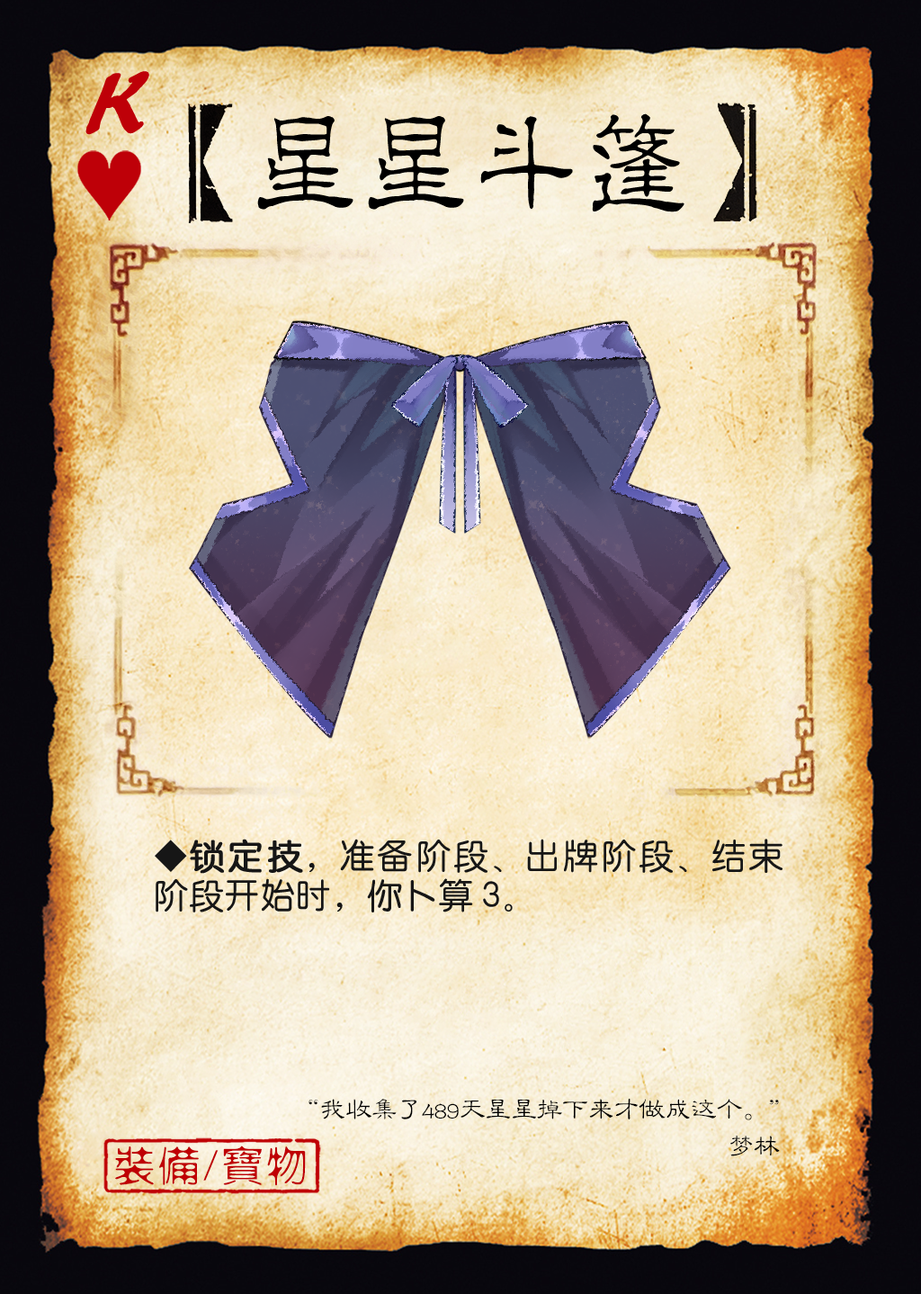
<style>
.page{position:relative;width:921px;height:1294px}
.page>*{position:absolute;margin:0}
.t1{font:110.9px "HYi1gf";color:#be0008;font-weight:bold;font-style:italic}
.t2{font:110.9px "¾­µä·±½ÇÁ¥ Regular";color:#000000}
.t3{font:35.6px/39.4px "HYe3gj";color:#161616}
.t4{font:35.6px/39.4px "HYe3gj";color:#161616;font-weight:bold}
.t5{font:27.1px "FZLBJW--GB1-0";letter-spacing:-0.05em;color:#000000}
.t6{font:41.4px "FZXSHFW--GB1-0";letter-spacing:0.08em;color:#bf0004}
</style>
<div class="page">
<p class="t1" style="left:85px;top:71px;width:64px;height:64px">K</p>
<p class="t2" style="left:257px;top:113px;width:428px;height:99px">星星斗篷</p>
<p class="t3" style="left:155px;top:839px;width:629px;height:73px;text-align:justify">◆<span class="t4">锁定技</span>，准备阶段、出牌阶段、结束阶段开始时，你卜算3。</p>
<p class="t5" style="left:309px;top:1098px;width:470px;height:22px">“我收集了489天星星掉下来才做成这个。”</p>
<p class="t6" style="left:115px;top:1146px;width:191px;height:40px">装备/宝物</p>
<p class="t5" style="left:731px;top:1136px;width:49px;height:20px">梦林</p>
</div>
